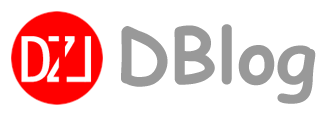
<style>
.page{position:relative;width:330px;height:120px;background:#ffffff}
.page>*{position:absolute;margin:0}
.t1{font:75px "ComicSansMS-Bold";color:#999999}
</style>
<div class="page">
<p class="t1" style="left:121px;top:24px;width:195px;height:80px">DBlog</p>
</div>
